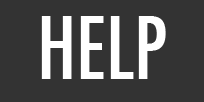
<style>
.page{position:relative;width:204px;height:102px;background:#333333}
.page>*{position:absolute;margin:0}
.t1{font:84px "Futura-CondensedMedium";color:#ffffff}
</style>
<div class="page">
<p class="t1" style="left:41px;top:16px;width:125px;height:63px">HELP</p>
</div>
